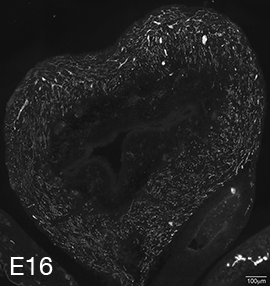
<style>
.page{position:relative;width:270px;height:286px}
.page>*{position:absolute;margin:0}
.t1{font:25.4px "HelveticaNeue";color:#ffffff}
</style>
<div class="page">
<p class="t1" style="left:10px;top:257px;width:43px;height:18px">E16</p>
</div>
